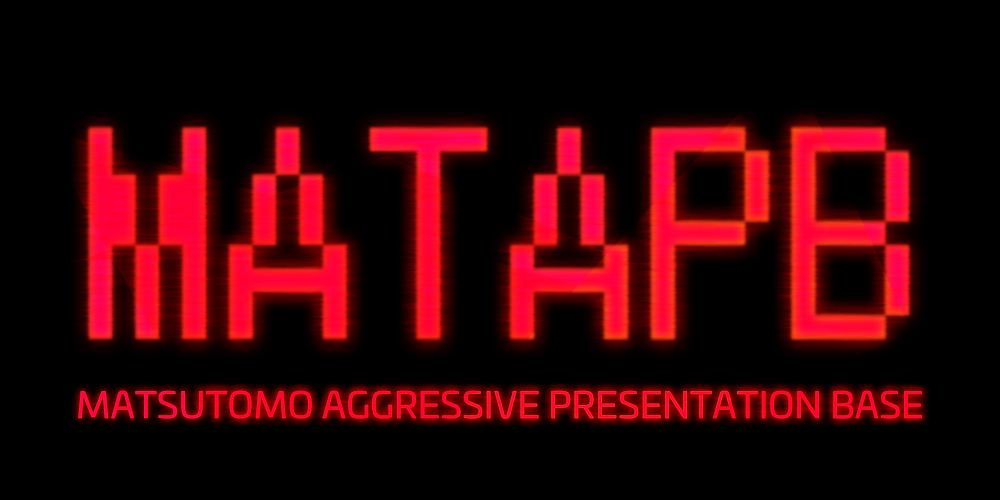
<style>
.page{position:relative;width:1000px;height:500px;background:#000000}
.page>*{position:absolute;margin:0}
.t1{font:36px "UniviaProRegular";color:#ff0833}
</style>
<div class="page">
<p class="t1" style="left:78px;top:390px;width:844px;height:29px">MATSUTOMO AGGRESSIVE PRESENTATION BASE</p>
</div>
